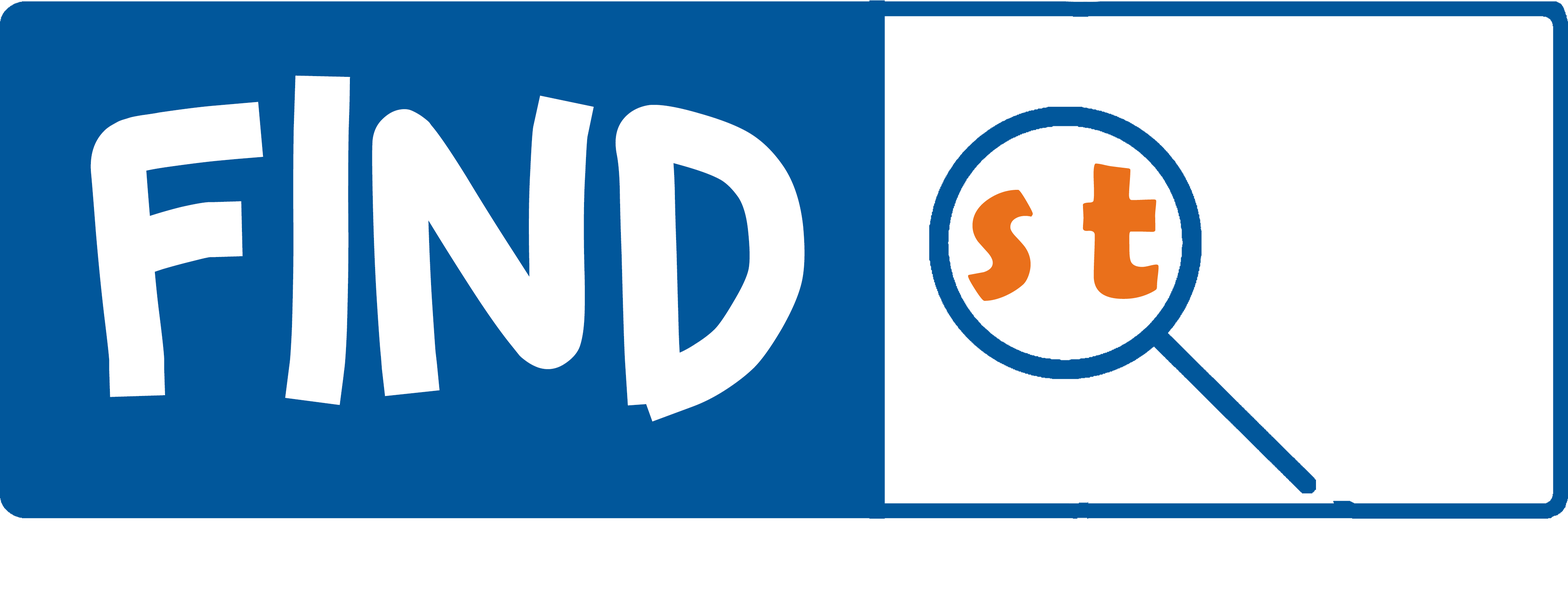
<style>
.page{position:relative;width:1568px;height:599px;background:#ffffff}
.page>*{position:absolute;margin:0}
.t1{font:445.7px "Animated";letter-spacing:0.05em;color:#ffffff}
.t2{font:210.6px "BerlinSansFBDemi-Bold";letter-spacing:0.2em;color:#ea701b}
.t3{font:210.6px "BerlinSansFBDemi-Bold";letter-spacing:0.2em;color:#ffffff}
</style>
<div class="page">
<p class="t1" style="left:90px;top:75px;width:715px;height:347px">FIND</p>
<p class="t2" style="left:968px;top:163px;width:479px;height:138px">st<span class="t3">ar</span></p>
</div>
